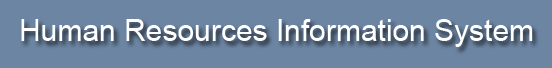
<style>
.page{position:relative;width:552px;height:68px;background:#6c85a3}
.page>*{position:absolute;margin:0}
.t1{font:30px "ArialMT";color:#ffffff}
</style>
<div class="page">
<p class="t1" style="left:21px;top:19px;width:512px;height:28px">Human Resources Information System</p>
</div>
